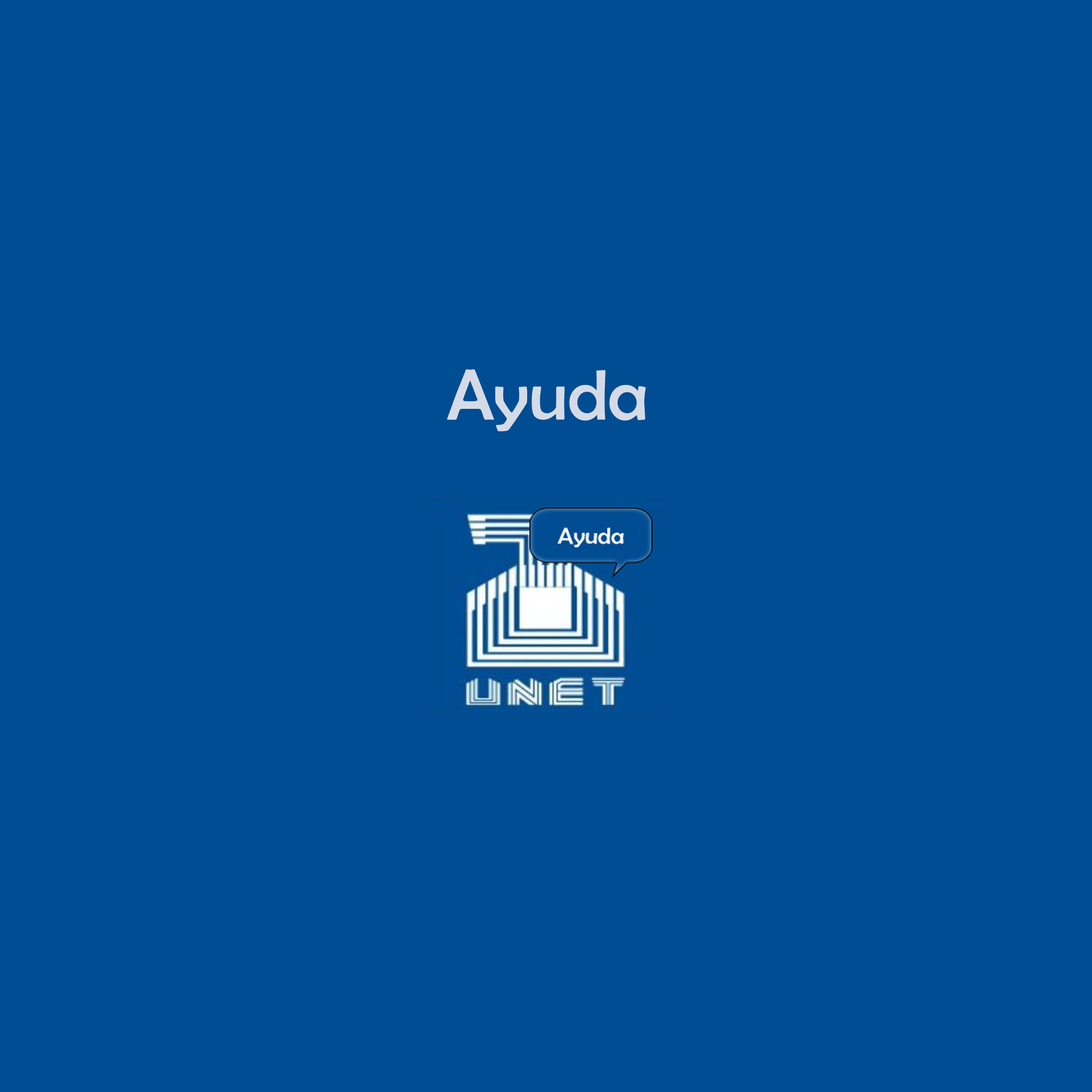
<style>
.page{position:relative;width:1092px;height:1092px;background:#004d93}
.page>*{position:absolute;margin:0}
.t1{font:71.9px "BerlinSansFB-Reg";color:#d4dbe7}
</style>
<div class="page">
<p class="t1" style="left:447px;top:369px;width:199px;height:62px">Ayuda</p>
</div>
